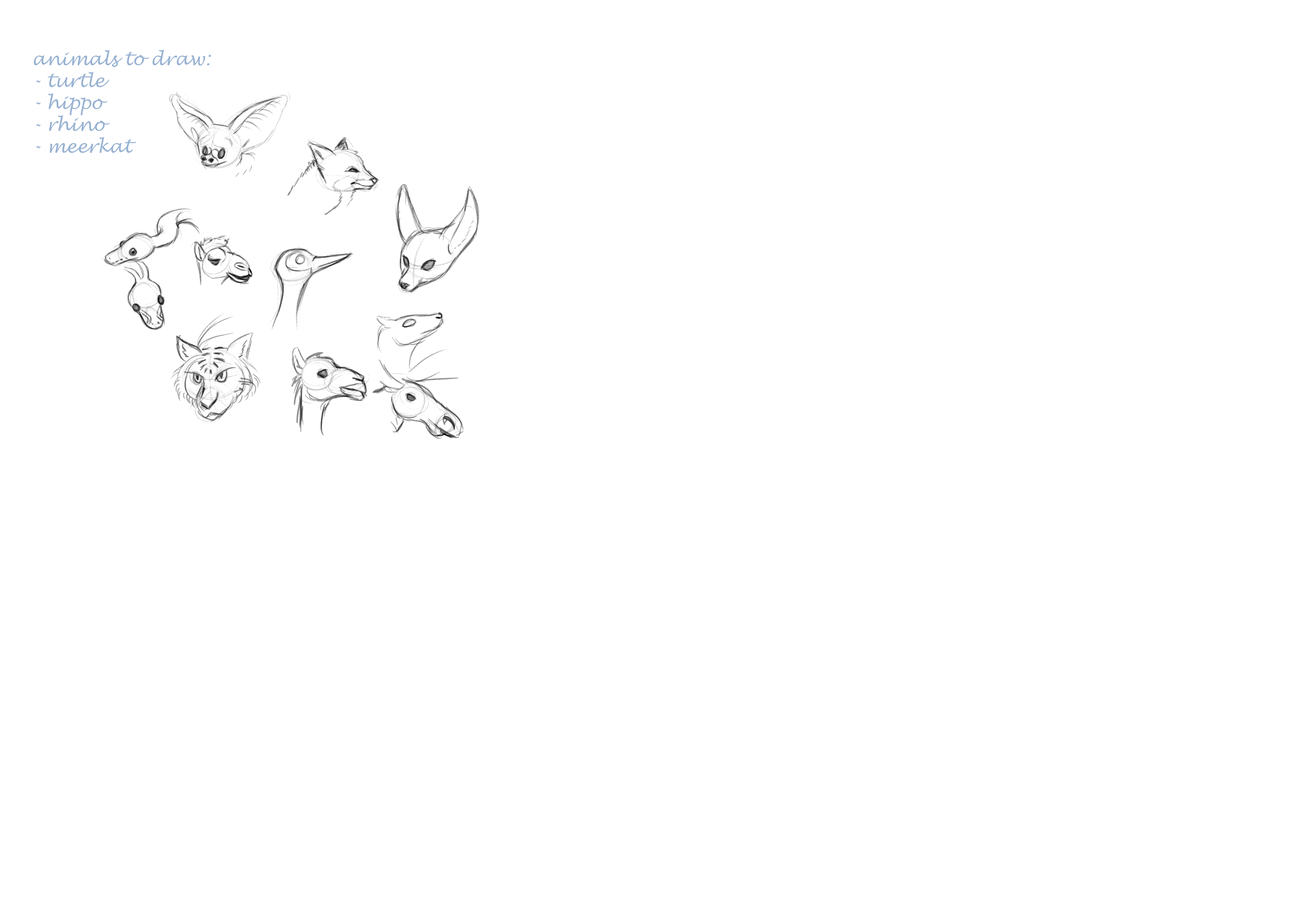
<style>
.page{position:relative;width:1312px;height:909px;background:#ffffff}
.page>*{position:absolute;margin:0}
.t1{font:18.2px "LucidaHandwriting-Italic";color:#99b3d3}
</style>
<div class="page">
<p class="t1" style="left:34px;top:49px;width:177px;height:104px">animals to draw:<br>- turtle<br>- hippo<br>- rhino<br>- meerkat</p>
</div>
